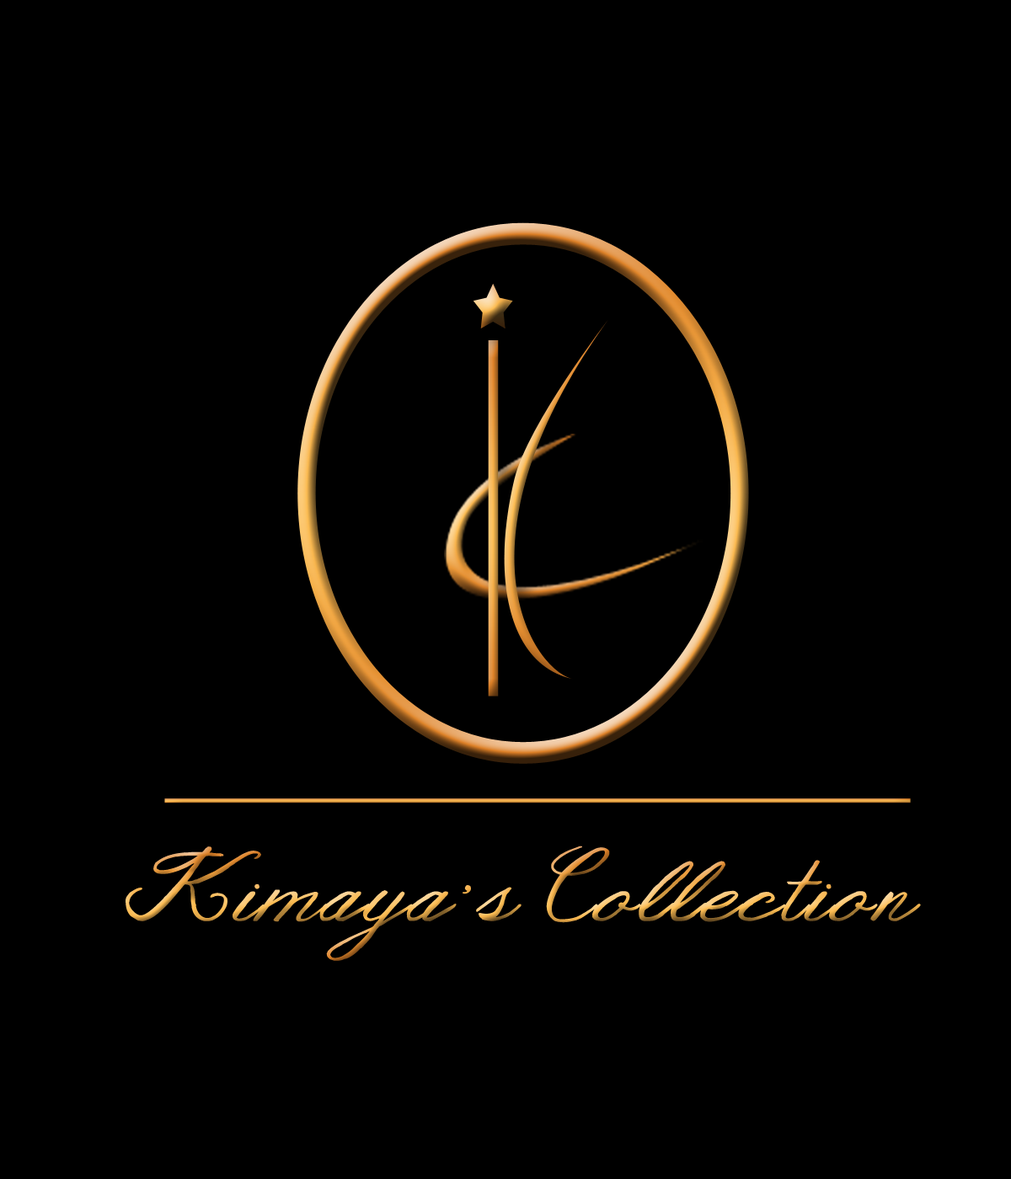
<style>
.page{position:relative;width:1011px;height:1179px;background:#000000}
.page>*{position:absolute;margin:0}
.t1{font:75.9px "JandaAsLongAsYouLoveMe";letter-spacing:0.05em;scale:1.04 1}
</style>
<div class="page">
<p class="t1" style="left:126px;top:846px;width:795px;height:115px">Kimaya’s Collection</p>
</div>
